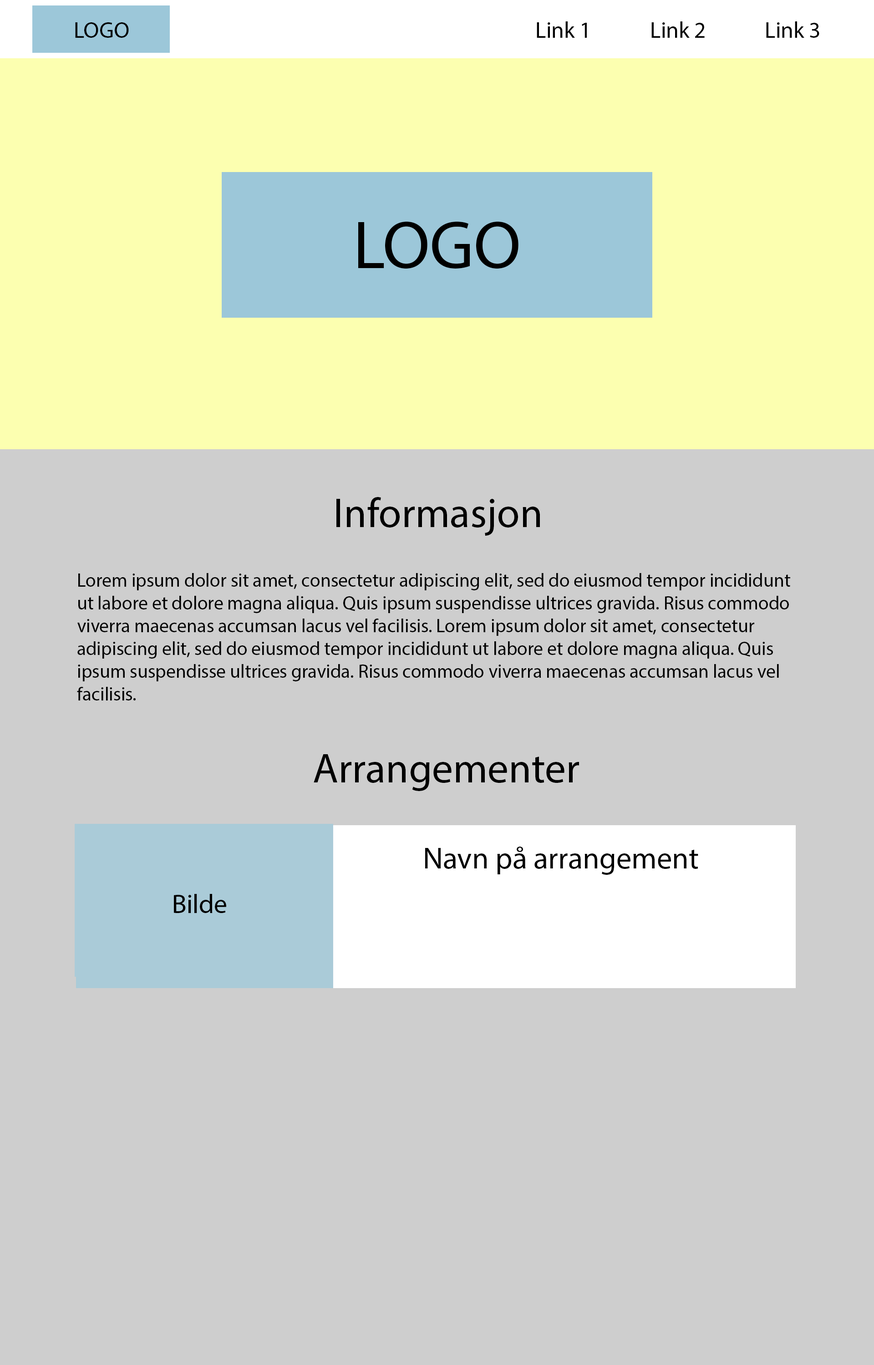
<style>
.page{position:relative;width:874px;height:1365px;background:#cecece}
.page>*{position:absolute;margin:0}
.t1{font:22.8px "MyriadPro-Regular";color:#000000}
.t2{font:68.3px "MyriadPro-Regular";color:#000000}
.t3{font:41.7px "MyriadPro-Regular";color:#000000}
.t4{font:19px "MyriadPro-Regular";color:#000000}
.t5{font:30.3px "MyriadPro-Regular";color:#000000}
.t6{font:26.5px "MyriadPro-Regular";color:#000000}
</style>
<div class="page">
<p class="t1" style="left:75px;top:22px;width:54px;height:16px">LOGO</p>
<p class="t1" style="left:537px;top:21px;width:282px;height:17px">Link 1    Link 2    Link 3</p>
<p class="t2" style="left:358px;top:221px;width:160px;height:48px">LOGO</p>
<p class="t3" style="left:336px;top:497px;width:204px;height:39px">Informasjon</p>
<p class="t4" style="left:77px;top:573px;width:713px;height:127px">Lorem ipsum dolor sit amet, consectetur adipiscing elit, sed do eiusmod tempor incididunt ut labore et dolore magna aliqua. Quis ipsum suspendisse ultrices gravida. Risus commodo viverra maecenas accumsan lacus vel facilisis. Lorem ipsum dolor sit amet, consectetur adipiscing elit, sed do eiusmod tempor incididunt ut labore et dolore magna aliqua. Quis ipsum suspendisse ultrices gravida. Risus commodo viverra maecenas accumsan lacus vel facilisis.</p>
<p class="t3" style="left:314px;top:754px;width:265px;height:37px">Arrangementer</p>
<p class="t5" style="left:425px;top:846px;width:273px;height:29px">Navn på arrangement</p>
<p class="t6" style="left:174px;top:894px;width:52px;height:19px">Bilde</p>
</div>
